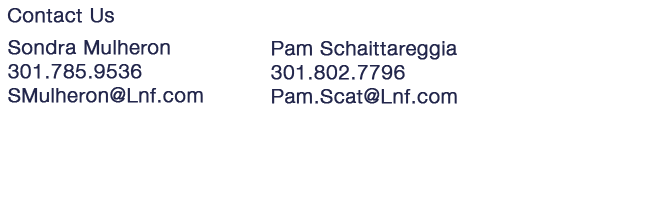
<style>
.page{position:relative;width:648px;height:216px;background:#ffffff}
.page>*{position:absolute;margin:0}
.t1{font:20px "HelveticaNeue-Light";letter-spacing:0.025em;color:#22264b;font-weight:bold}
</style>
<div class="page">
<p class="t1" style="left:7px;top:8px;width:107px;height:15px">Contact Us</p>
<p class="t1" style="left:8px;top:40px;width:195px;height:63px">Sondra Mulheron<br>301.785.9536<br>SMulheron@Lnf.com</p>
<p class="t1" style="left:271px;top:41px;width:186px;height:63px">Pam Schaittareggia<br>301.802.7796<br>Pam.Scat@Lnf.com</p>
</div>
